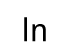
<style>
.page{position:relative;width:70px;height:55px;background:#ffffff}
.page>*{position:absolute;margin:0}
.t1{font:31.8px "DroidSans";color:#000000}
</style>
<div class="page">
<p class="t1" style="left:24px;top:17px;width:22px;height:25px">ln</p>
</div>
